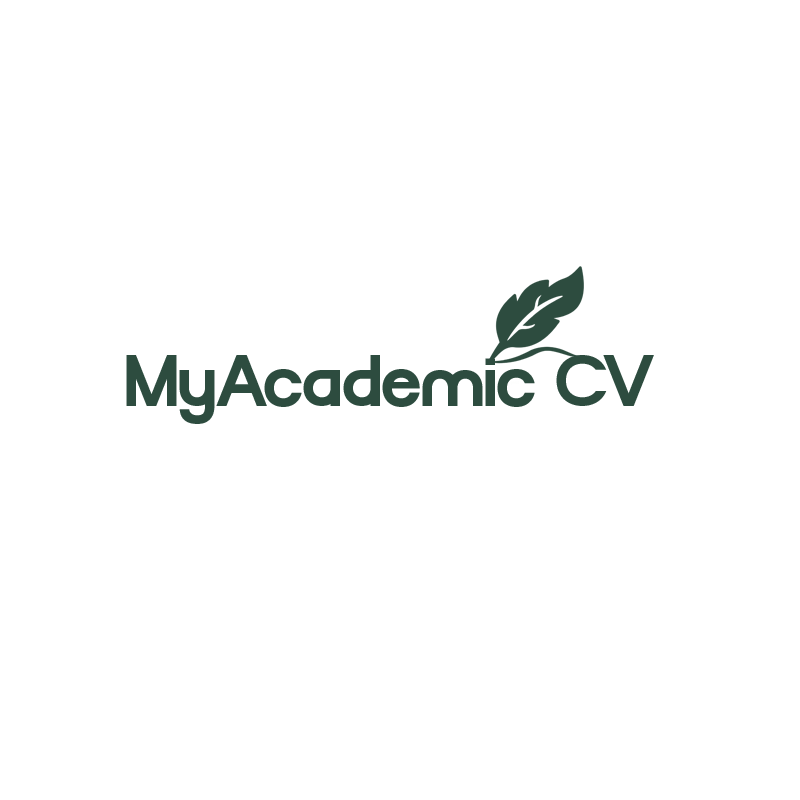
<style>
.page{position:relative;width:800px;height:800px;background:#ffffff}
.page>*{position:absolute;margin:0}
.t1{font:72.6px "TRIGOLE-Regular";color:#2d4c3f}
</style>
<div class="page">
<p class="t1" style="left:126px;top:355px;width:528px;height:69px">MyAcademic CV</p>
</div>
